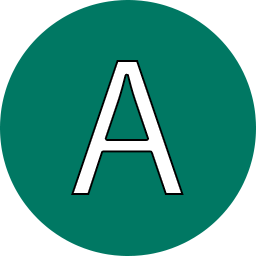
<style>
.page{position:relative;width:256px;height:256px;background:#007863}
.page>*{position:absolute;margin:0}
.t1{font:200px "MyriadPro-Regular";color:#ffffff}
</style>
<div class="page">
<p class="t1" style="left:71px;top:60px;width:113px;height:135px">A</p>
</div>
